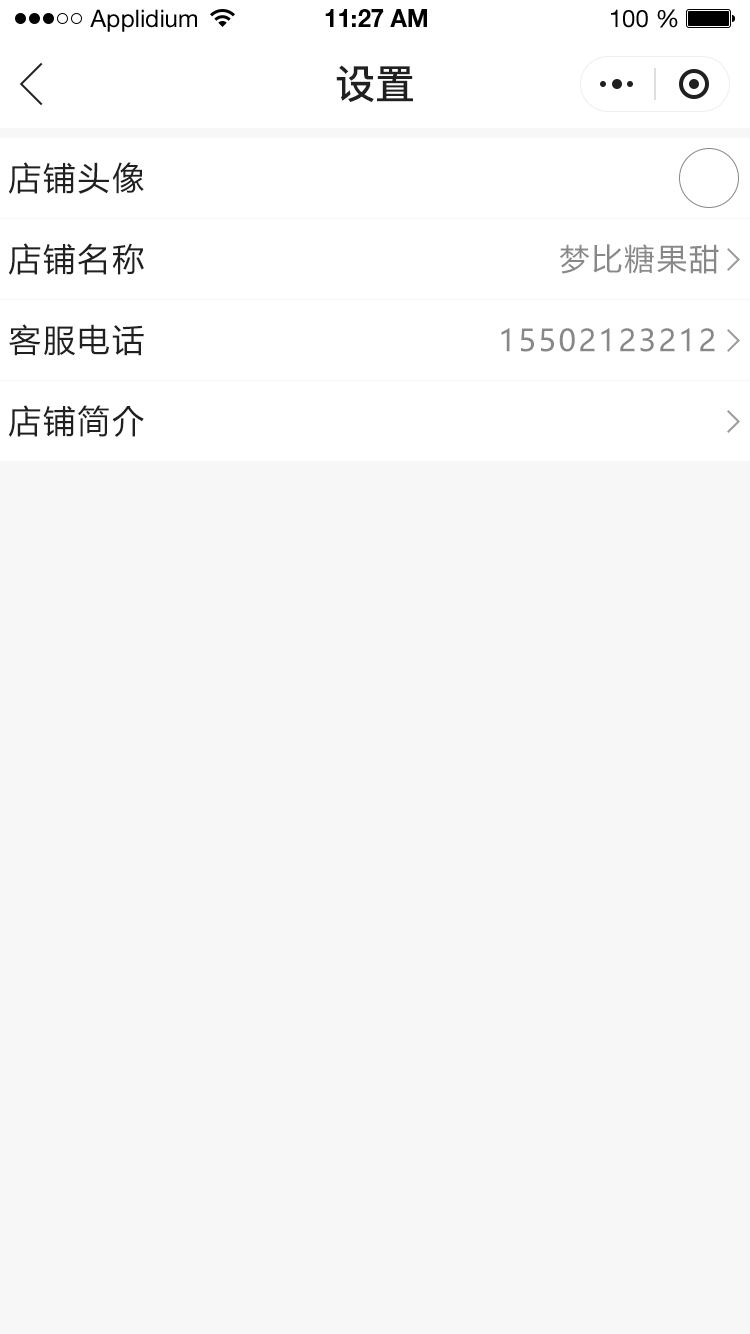
<style>
.page{position:relative;width:750px;height:1334px;background:#f7f7f7}
.page>*{position:absolute;margin:0}
.t1{font:24px "HelveticaNeueLTStd-Roman";color:#000000}
.t2{font:24px "HelveticaNeueLTStd-Bd";color:#000000}
.t3{font:40px "PingFang-SC-Bold";color:#202020;text-transform:uppercase}
.t4{font:32px "MicrosoftYaHei";letter-spacing:0.08em;color:#202020}
.t5{font:30px "MicrosoftYaHei";letter-spacing:0.08em;color:#888888}
</style>
<div class="page">
<p class="t1" style="left:90px;top:9px;width:107px;height:23px">Applidium</p>
<p class="t2" style="left:325px;top:9px;width:102px;height:18px">11:27 AM</p>
<p class="t1" style="left:611px;top:9px;width:67px;height:19px">100 %</p>
<p class="t3" style="left:336px;top:65px;width:77px;height:37px">设置</p>
<p class="t4" style="left:8px;top:162px;width:136px;height:32px">店铺头像</p>
<p class="t4" style="left:8px;top:243px;width:136px;height:32px">店铺名称</p>
<p class="t5" style="left:560px;top:244px;width:159px;height:30px">梦比糖果甜</p>
<p class="t4" style="left:9px;top:324px;width:135px;height:32px">客服电话</p>
<p class="t5" style="left:501px;top:328px;width:214px;height:24px">15502123212</p>
<p class="t4" style="left:8px;top:405px;width:136px;height:32px">店铺简介</p>
</div>
